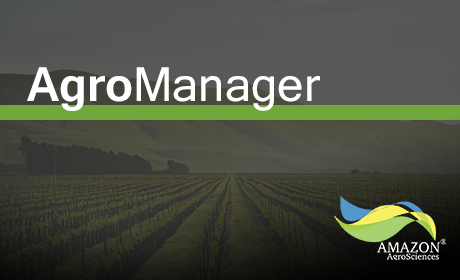
<style>
.page{position:relative;width:460px;height:280px}
.page>*{position:absolute;margin:0}
.t1{font:51.1px "Gautami";color:#ffffff}
.t2{font:51.1px "Gautami-Bold";color:#ffffff}
</style>
<div class="page">
<p class="t1" style="left:27px;top:67px;width:293px;height:44px"><span class="t2">Agro</span>Manager</p>
</div>
